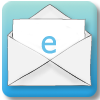
<style>
.page{position:relative;width:100px;height:100px;background:#f2f2f2}
.page>*{position:absolute;margin:0}
.t1{font:30px "Tahoma";color:#65c0e9}
</style>
<div class="page">
<p class="t1" style="left:41px;top:36px;width:15px;height:18px">e</p>
</div>
